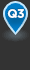
<style>
.page{position:relative;width:30px;height:70px;background:#333333}
.page>*{position:absolute;margin:0}
.t1{font:12px "Gotham-Bold";color:#ffffff}
</style>
<div class="page">
<p class="t1" style="left:7px;top:9px;width:17px;height:9px">Q3</p>
</div>
